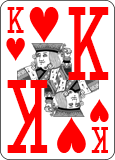
<style>
.page{position:relative;width:115px;height:160px;background:#ffffff}
.page>*{position:absolute;margin:0}
.t1{font:31.1px "CardCharacters";color:#ff0000;scale:0.95 1}
.t2{font:86.4px "CardCharacters";color:#ff0000;scale:0.83 1}
</style>
<div class="page">
<p class="t1" style="left:7px;top:7px;width:17px;height:26px">K</p>
<p class="t2" style="left:68px;top:7px;width:41px;height:73px">K</p>
<p class="t2" style="left:7px;top:80px;width:41px;height:73px;rotate:180deg">K</p>
<p class="t1" style="left:91px;top:127px;width:17px;height:26px;rotate:180deg">K</p>
</div>
